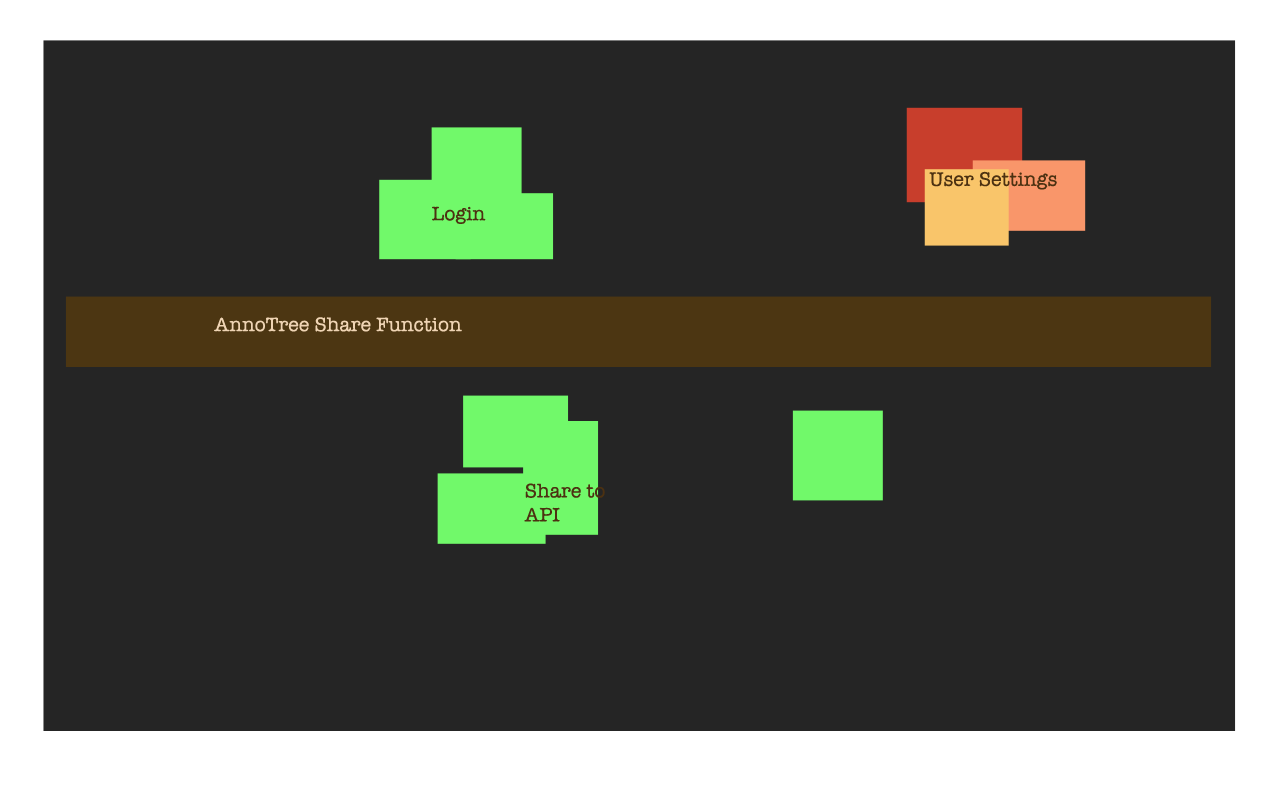
<style>
.page{position:relative;width:1280px;height:800px;background:#252525}
.page>*{position:absolute;margin:0}
.t1{font:20px "AmericanTypewriter";color:#4c3111}
.t2{font:20px "AmericanTypewriter";color:#efd4b4}
</style>
<div class="page">
<p class="t1" style="left:929px;top:171px;width:128px;height:19px">User Settings</p>
<p class="t1" style="left:432px;top:206px;width:54px;height:18px">Login</p>
<p class="t2" style="left:214px;top:317px;width:248px;height:15px">AnnoTree Share Function</p>
<p class="t1" style="left:524px;top:483px;width:81px;height:39px">Share to<br>API</p>
</div>
